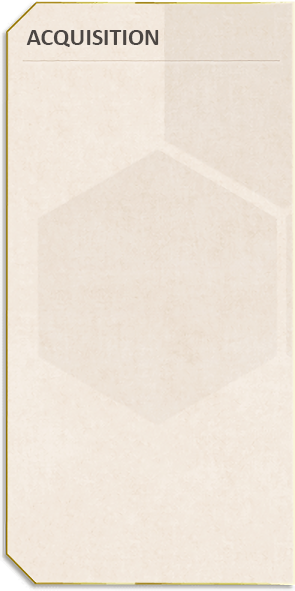
<style>
.page{position:relative;width:295px;height:591px}
.page>*{position:absolute;margin:0}
.t1{font:24px "Calibri-Bold";color:#4b4643}
</style>
<div class="page">
<p class="t1" style="left:26px;top:30px;width:133px;height:17px">ACQUISITION</p>
</div>
